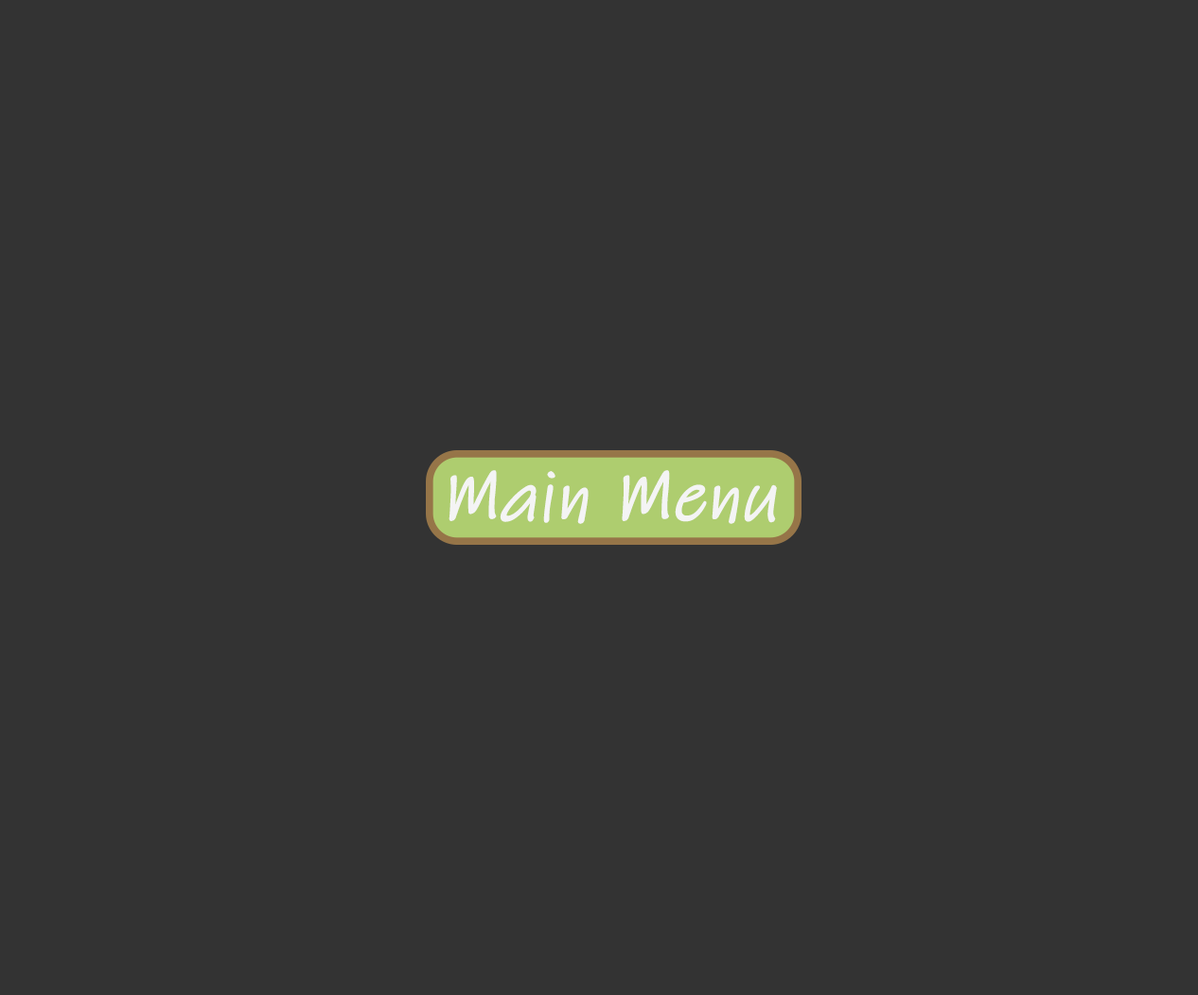
<style>
.page{position:relative;width:1198px;height:995px;background:#333333}
.page>*{position:absolute;margin:0}
.t1{font:70.6px "InkFree";color:#f4f4f4;font-weight:bold;font-style:italic}
</style>
<div class="page">
<p class="t1" style="left:449px;top:470px;width:328px;height:54px">Main Menu</p>
</div>
